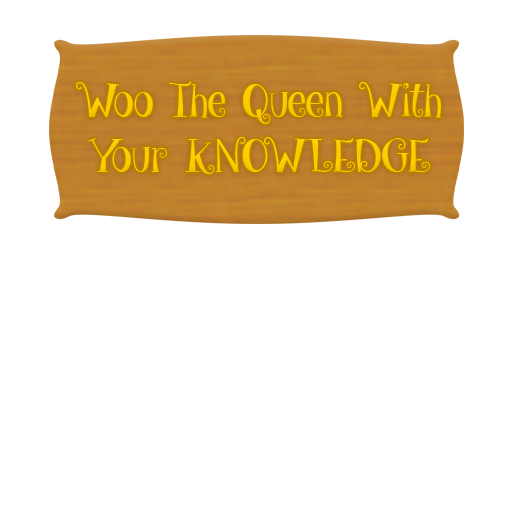
<style>
.page{position:relative;width:512px;height:512px;background:#ffffff}
.page>*{position:absolute;margin:0}
.t1{font:45.8px "give_me_some_sugar";color:#ffcc00}
</style>
<div class="page">
<p class="t1" style="left:76px;top:81px;width:366px;height:93px;text-align:center">Woo The Queen With<br>Your KNOWLEDGE</p>
</div>
